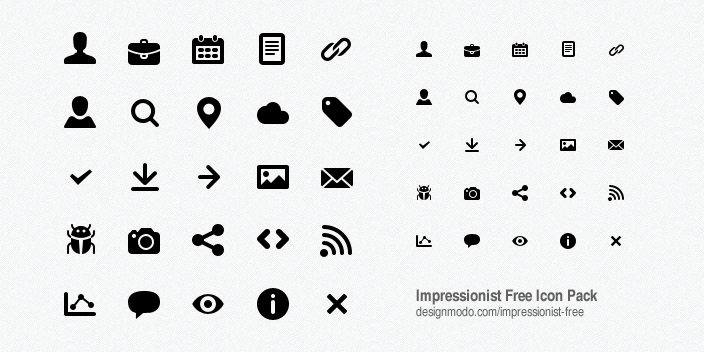
<style>
.page{position:relative;width:704px;height:352px}
.page>*{position:absolute;margin:0}
.t1{font:13px/15px "Helvetica-NarrowCE-Regular";color:#626161}
.t2{font:16px "Helvetica-NarrowCE-Bold";color:#626161}
</style>
<div class="page">
<p class="t1" style="left:416px;top:289px;width:182px;height:30px"><span class="t2">Impressionist Free Icon Pack<br></span>designmodo.com/impressionist-free</p>
</div>
